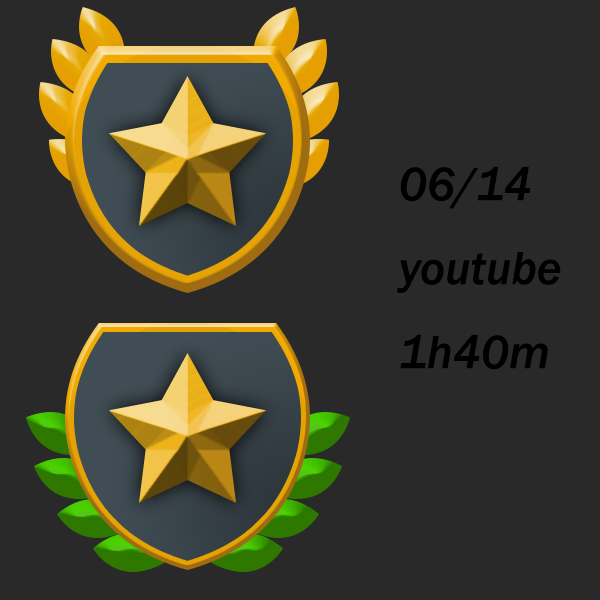
<style>
.page{position:relative;width:600px;height:600px;background:#292929}
.page>*{position:absolute;margin:0}
.t1{font:48px "FranklinGothic-MediumItalic";color:#000000}
</style>
<div class="page">
<p class="t1" style="left:397px;top:166px;width:164px;height:204px">06/14<br>youtube<br>1h40m</p>
</div>
